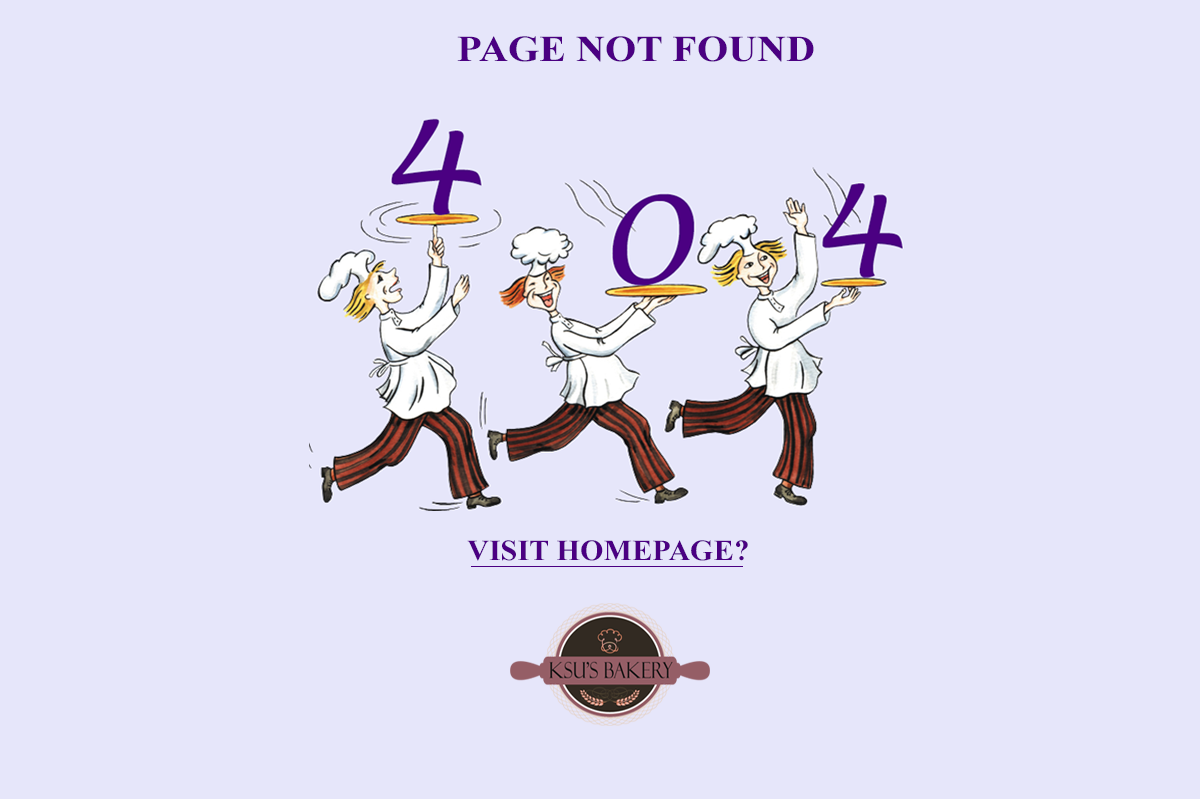
<style>
.page{position:relative;width:1200px;height:799px;background:#e6e6fa}
.page>*{position:absolute;margin:0}
.t1{font:36.5px "TimesNewRomanPS-BoldMT";color:#4b0082;scale:1.1 1}
.t2{font:29.3px "TimesNewRomanPS-BoldMT";color:#4b0082;scale:1.03 1}
</style>
<div class="page">
<p class="t1" style="left:457px;top:36px;width:357px;height:26px">PAGE NOT FOUND</p>
<p class="t2" style="left:467px;top:540px;width:281px;height:21px">VISIT HOMEPAGE?</p>
</div>
